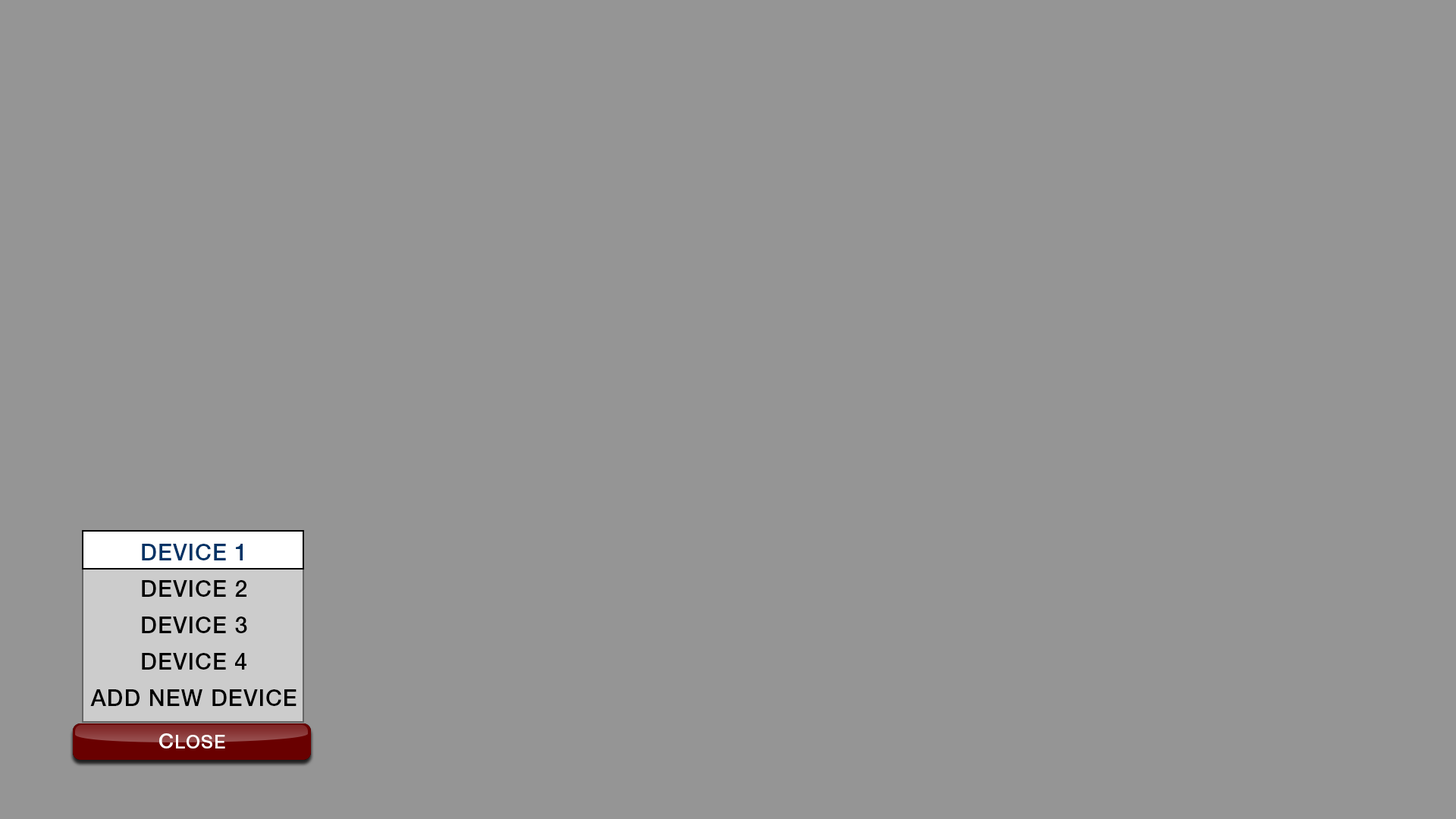
<style>
.page{position:relative;width:1456px;height:819px;background:#959595}
.page>*{position:absolute;margin:0}
.t1{font:22.7px/36.4px "HelveticaNeueLTStd-Md";letter-spacing:0.04em;color:#000000}
.t2{font:22.7px/36.4px "HelveticaNeueLTStd-Md";letter-spacing:0.04em;color:#003366}
.t3{font:18.2px "HelveticaNeueLTStd-Md";letter-spacing:0.05em;color:#ffffff}
.t4{font:21.2px "HelveticaNeueLTStd-Md";letter-spacing:0.05em;color:#ffffff}
</style>
<div class="page">
<p class="t1" style="left:90px;top:544px;width:207px;height:162px;text-align:center"><span class="t2">DEVICE 1<br></span>DEVICE 2<br>DEVICE 3<br>DEVICE 4<br>ADD NEW DEVICE</p>
<p class="t3" style="left:159px;top:733px;width:66px;height:15px"><span class="t4">C</span>LOSE</p>
</div>
